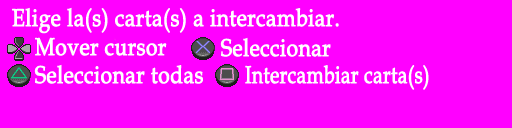
<style>
.page{position:relative;width:512px;height:128px;background:#ff00ff}
.page>*{position:absolute;margin:0}
.t1{font:24.2px "BookAntiqua";color:#ffffff;font-weight:bold;scale:0.86 1}
.t2{font:24.2px "BookAntiqua";color:#ffffff;font-weight:bold;scale:0.78 1}
</style>
<div class="page">
<p class="t1" style="left:12px;top:7px;width:327px;height:27px">Elige la(s) carta(s) a intercambiar.</p>
<p class="t1" style="left:35px;top:37px;width:132px;height:19px">Mover cursor</p>
<p class="t1" style="left:220px;top:37px;width:111px;height:20px">Seleccionar</p>
<p class="t1" style="left:34px;top:64px;width:169px;height:20px">Seleccionar todas</p>
<p class="t2" style="left:245px;top:65px;width:184px;height:25px">Intercambiar carta(s)</p>
</div>
